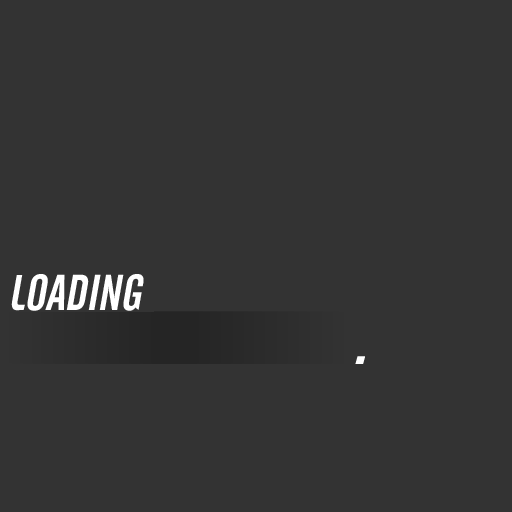
<style>
.page{position:relative;width:512px;height:512px;background:#333333}
.page>*{position:absolute;margin:0}
.t1{font:50px "UTM-Cafeta";color:#ffffff;text-transform:uppercase;font-style:italic}
</style>
<div class="page">
<p class="t1" style="left:11px;top:274px;width:133px;height:37px">loading</p>
</div>
